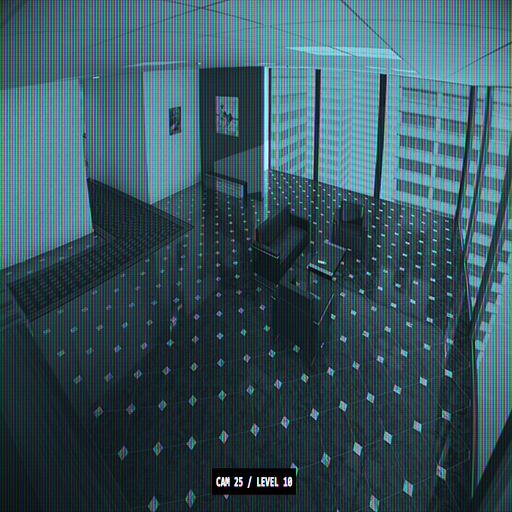
<style>
.page{position:relative;width:512px;height:512px}
.page>*{position:absolute;margin:0}
.t1{font:13.7px "Consolas-Bold";color:#ffffff;font-weight:bold;scale:0.56 1}
</style>
<div class="page">
<p class="t1" style="left:216px;top:476px;width:77px;height:12px">CAM 25 / LEVEL 10</p>
</div>
